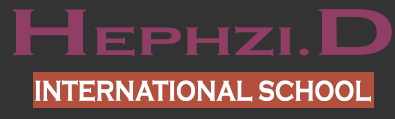
<style>
.page{position:relative;width:395px;height:119px;background:#333333}
.page>*{position:absolute;margin:0}
.t1{font:40.8px "CopperplateGothic-Bold";color:#903e66;scale:1.45 1}
.t2{font:68px "CopperplateGothic-Bold";color:#903e66;scale:1.45 1}
.t3{font:29.5px "CopperplateGothic-Bold";color:#ffffff;scale:0.79 1}
</style>
<div class="page">
<p class="t1" style="left:12px;top:9px;width:380px;height:48px"><span class="t2">H</span>EPHZI.<span class="t2">D</span></p>
<p class="t3" style="left:35px;top:80px;width:336px;height:22px">INTERNATIONAL SCHOOL</p>
</div>
